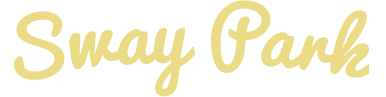
<style>
.page{position:relative;width:386px;height:97px;background:#ffffff}
.page>*{position:absolute;margin:0}
.t1{font:72px "Pacifico";color:#ebda86}
</style>
<div class="page">
<p class="t1" style="left:14px;top:0px;width:356px;height:97px">Sway Park</p>
</div>
